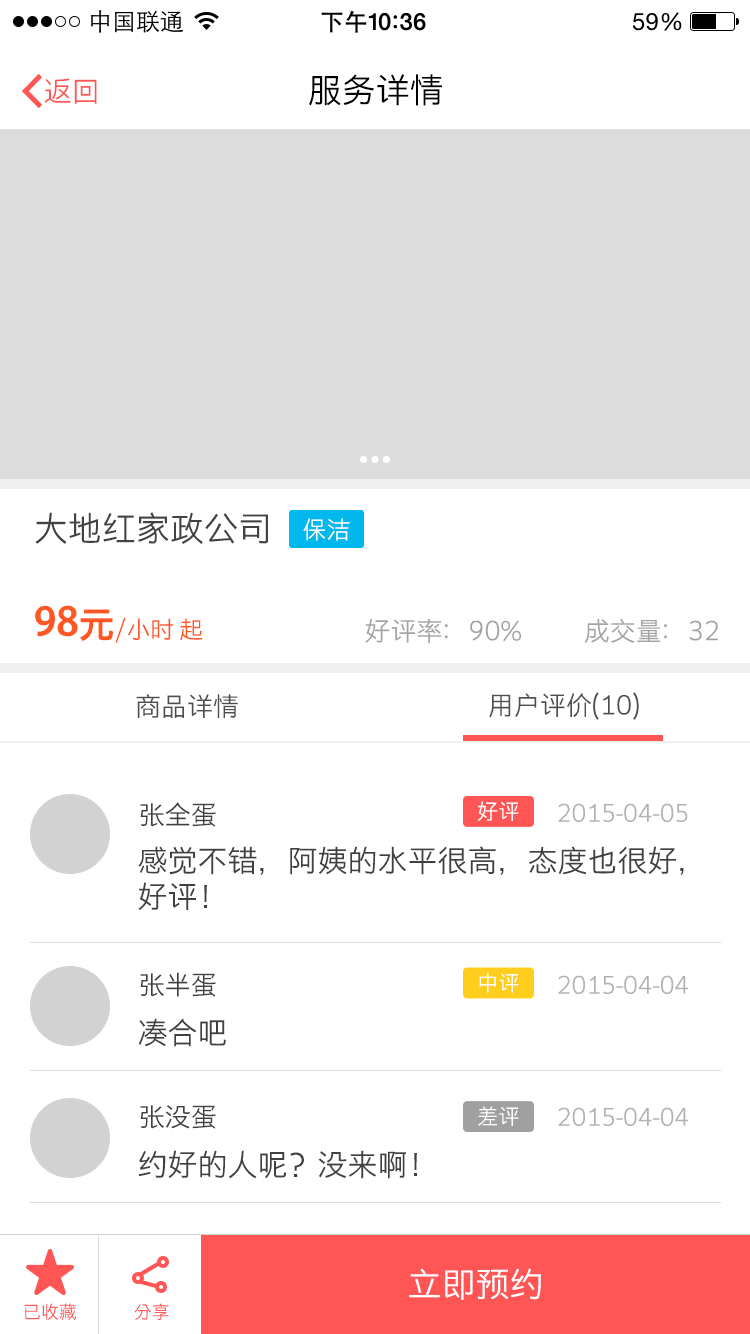
<style>
.page{position:relative;width:750px;height:1334px;background:#ffffff}
.page>*{position:absolute;margin:0}
.t1{font:28px "STHeitiSC-Light";color:#ff5555}
.t2{font:34px "STHeitiSC-Light";color:#000000}
.t3{font:34px "STHeitiSC-Light";color:#424242}
.t4{font:24px "STHeitiSC-Light";color:#ffffff}
.t5{font:24px "STHeitiSC-Light";color:#ff5723}
.t6{font:48px "STHeitiSC-Medium";color:#ff5723}
.t7{font:36px "STHeitiSC-Medium";color:#ff5723}
.t8{font:26px "STHeitiSC-Light";color:#a3a3a3}
.t9{font:26px "STHeitiSC-Light";color:#4e4e4e}
.t10{font:26px "STHeitiSC-Light";color:#404040}
.t11{font:21.4px "STHeitiSC-Light";color:#ffffff}
.t12{font:24px "STHeitiSC-Light";color:#b2b0b0}
.t13{font:30px/36px "STHeitiSC-Light";color:#404040}
.t14{font:30px "STHeitiSC-Light";color:#404040}
.t15{font:34px "STHeitiSC-Light";color:#ffffff}
.t16{font:18px "STHeitiSC-Light";color:#ff5555}
</style>
<div class="page">
<p class="t1" style="left:44px;top:78px;width:53px;height:26px">返回</p>
<p class="t2" style="left:309px;top:74px;width:133px;height:32px">服务详情</p>
<p class="t3" style="left:35px;top:512px;width:233px;height:32px">大地红家政公司</p>
<p class="t4" style="left:303px;top:518px;width:47px;height:23px">保洁</p>
<p class="t5" style="left:35px;top:605px;width:168px;height:38px"><span class="t6">98</span><span class="t7">元</span>/小时 起</p>
<p class="t8" style="left:365px;top:618px;width:353px;height:25px">好评率：90%            成交量：32</p>
<p class="t9" style="left:136px;top:694px;width:102px;height:24px">商品详情</p>
<p class="t9" style="left:489px;top:692px;width:150px;height:28px">用户评价(10)</p>
<p class="t10" style="left:140px;top:802px;width:76px;height:25px">张全蛋</p>
<p class="t11" style="left:477px;top:801px;width:42px;height:20px">好评</p>
<p class="t12" style="left:558px;top:803px;width:130px;height:19px">2015-04-05</p>
<p class="t13" style="left:138px;top:846px;width:546px;height:65px">感觉不错，阿姨的水平很高，态度也很好，<br>好评！</p>
<p class="t10" style="left:140px;top:972px;width:76px;height:25px">张半蛋</p>
<p class="t11" style="left:479px;top:973px;width:40px;height:20px">中评</p>
<p class="t12" style="left:558px;top:975px;width:130px;height:19px">2015-04-04</p>
<p class="t14" style="left:138px;top:1018px;width:88px;height:29px">凑合吧</p>
<p class="t10" style="left:140px;top:1105px;width:76px;height:24px">张没蛋</p>
<p class="t11" style="left:478px;top:1106px;width:41px;height:20px">差评</p>
<p class="t12" style="left:558px;top:1107px;width:130px;height:19px">2015-04-04</p>
<p class="t14" style="left:138px;top:1150px;width:279px;height:29px">约好的人呢？没来啊！</p>
<p class="t15" style="left:409px;top:1268px;width:132px;height:32px">立即预约</p>
<p class="t16" style="left:24px;top:1303px;width:52px;height:17px">已收藏</p>
<p class="t16" style="left:134px;top:1303px;width:35px;height:17px">分享</p>
</div>
